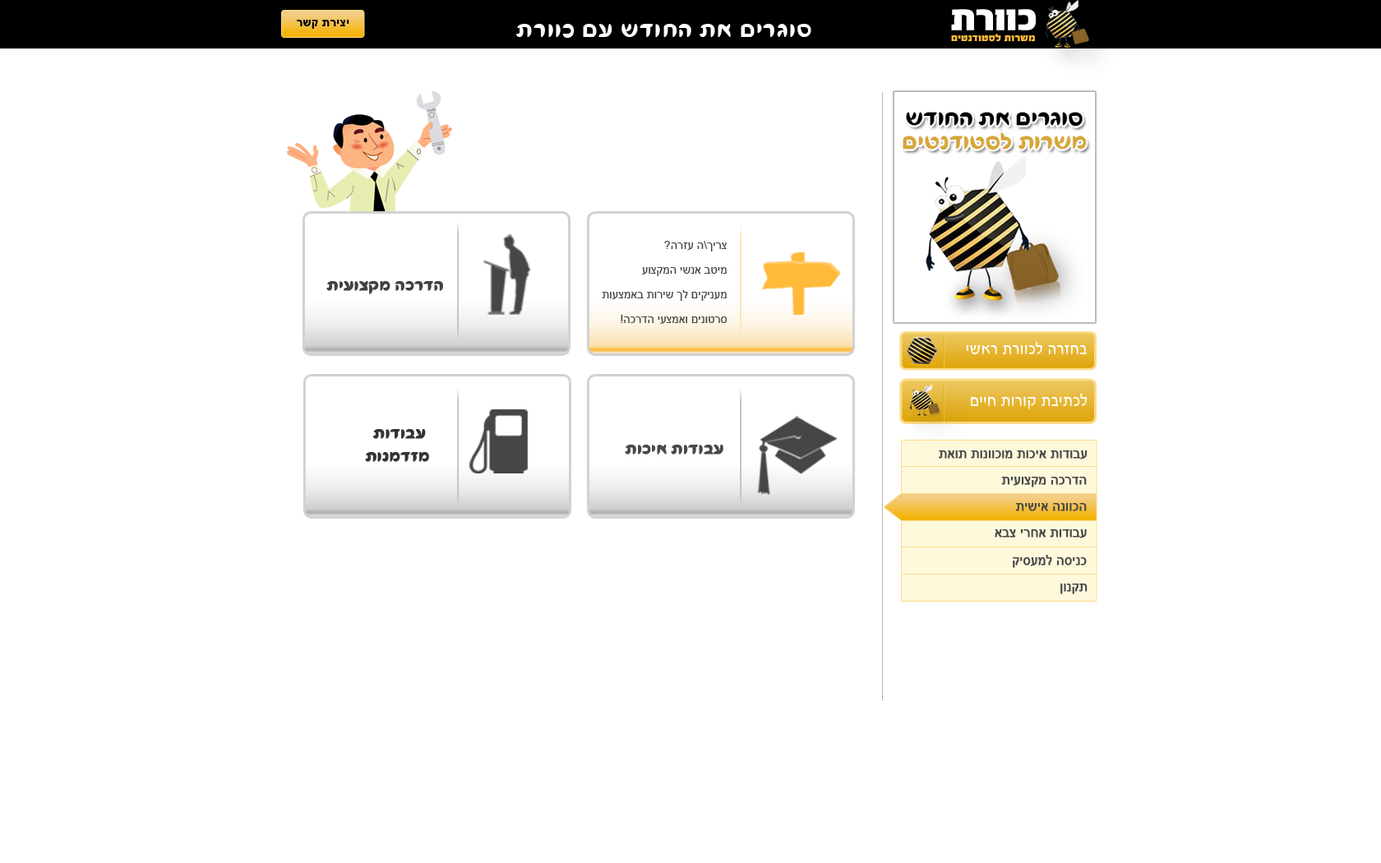
<style>
.page{position:relative;width:1381px;height:863px;background:#ffffff}
.page>*{position:absolute;margin:0}
.t1{font:11.5px "Arial-BoldMT";letter-spacing:0.03em;color:#000000}
.t2{font:28.8px "FbFlamingo-Regular";letter-spacing:0.03em;color:#ffffff}
.t3{font:9.9px "FbAdrenalin-Black";letter-spacing:0.03em;color:#ffba3a}
.t4{font:11.5px/24.7px "ArialMT";color:#464646}
.t5{font:19.7px "FbFlamingo-Regular";color:#414141;font-weight:bold}
.t6{font:16.4px "FbConcept-Regular";letter-spacing:0.03em;color:#ffffff}
.t7{font:19.7px "FbFlamingo-Regular";color:#333333;font-weight:bold}
.t8{font:19.7px "FbFlamingo-Regular";color:#484848;font-weight:bold}
.t9{font:12.9px "ArialMT";color:#464646;font-weight:bold}
</style>
<div class="page">
<p class="t1" style="left:297px;top:20px;width:52px;height:9px">רשק תריצי</p>
<p class="t2" style="left:516px;top:24px;width:295px;height:14px">תרווכ םע שדוחה תא םירגוס</p>
<p class="t3" style="left:951px;top:34px;width:84px;height:8px">םיטנדוטסל תורשמ</p>
<p class="t4" style="left:602px;top:241px;width:125px;height:83px">?הרזע ה\ךירצ<br> עוצקמה ישנא בטימ<br> תועצמאב תוריש ךל םיקינעמ<br>!הכרדה יעצמאו םינוטרס</p>
<p class="t5" style="left:326px;top:281px;width:117px;height:13px">תיעוצקמ הכרדה</p>
<p class="t6" style="left:966px;top:342px;width:121px;height:12px">ישאר תרווכל הרזחב</p>
<p class="t6" style="left:971px;top:394px;width:117px;height:15px">םייח תורוק תביתכל</p>
<p class="t7" style="left:365px;top:429px;width:64px;height:33px;text-align:center">תודובע<br>תונמדזמ</p>
<p class="t8" style="left:625px;top:445px;width:99px;height:10px;text-align:center">תוכיא תודובע<br>ראות תונווכומ</p>
<p class="t9" style="left:939px;top:451px;width:149px;height:9px">תאות תונווכומ תוכיא תודובע</p>
<p class="t9" style="left:1001px;top:477px;width:86px;height:11px">תיעוצקמ הכרדה</p>
<p class="t9" style="left:1015px;top:503px;width:72px;height:8px">תישיא הנווכה</p>
<p class="t9" style="left:995px;top:529px;width:92px;height:10px">אבצ ירחא תודובע</p>
<p class="t9" style="left:1013px;top:555px;width:74px;height:13px">קיסעמל הסינכ</p>
<p class="t9" style="left:1061px;top:584px;width:27px;height:10px">ןונקת</p>
</div>
